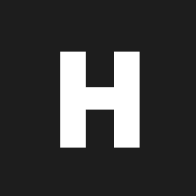
<style>
.page{position:relative;width:196px;height:196px;background:#1d1d1d}
.page>*{position:absolute;margin:0}
.t1{font:147px "SourceSansPro-Black";letter-spacing:-0.025em;color:#ffffff}
</style>
<div class="page">
<p class="t1" style="left:60px;top:51px;width:80px;height:97px">H</p>
</div>
